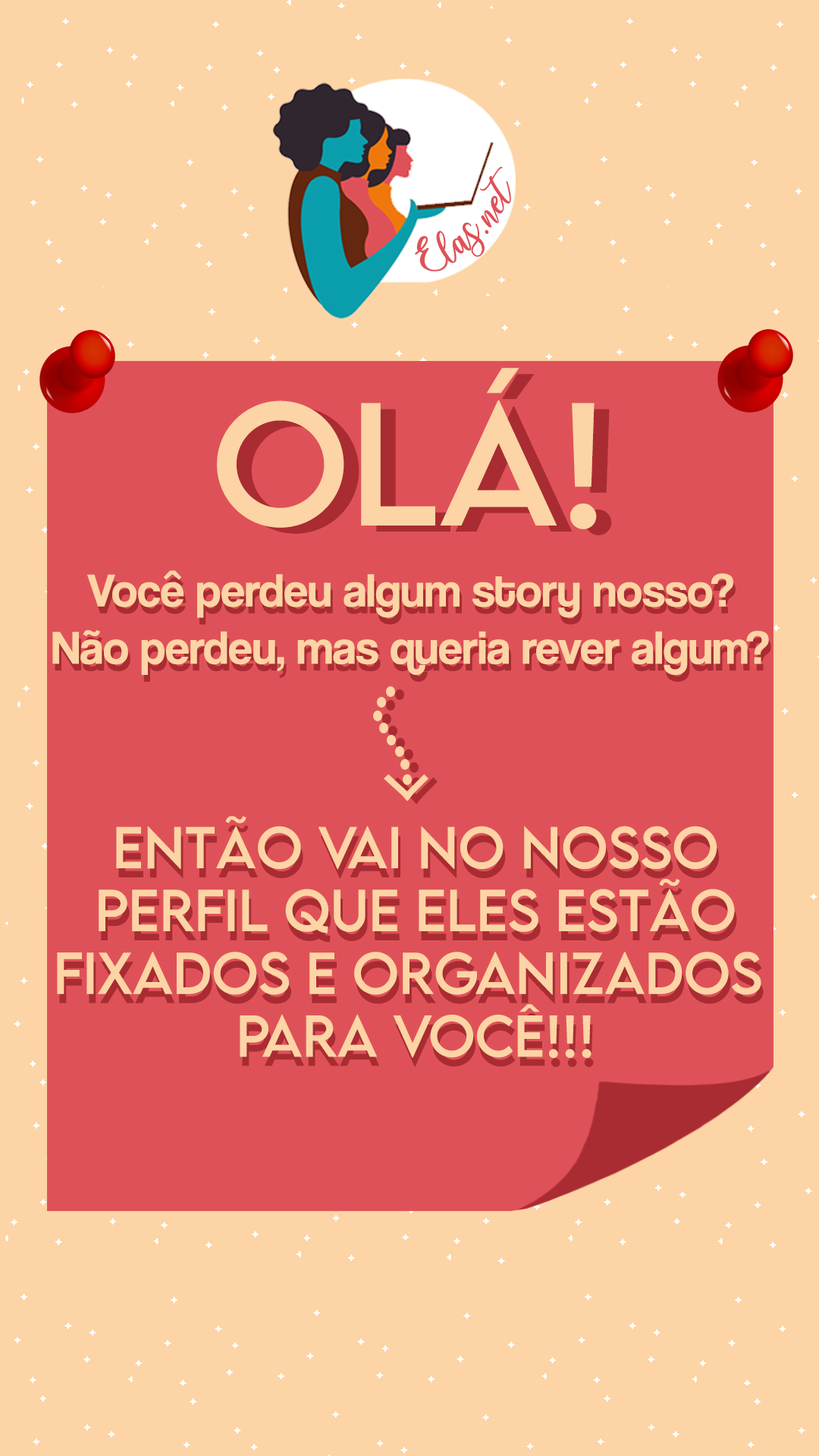
<style>
.page{position:relative;width:819px;height:1456px;background:#fcd4a5}
.page>*{position:absolute;margin:0}
.t1{font:28.8px "charlinda-Regular";color:#df5158;scale:1.17 1}
.t2{font:155.6px "LEMONMILK-Regular";color:#fcd4a5}
.t3{font:155.6px "LEMONMILK-Regular"}
.t4{font:47.8px "CoolveticaRg-Regular";color:#fcd4a5}
.t5{font:56.2px "CaviarDreams";color:#fcd4a5}
.t6{font:47.8px "CoolveticaRg-Regular"}
.t7{font:56.2px "CaviarDreams"}
.t8{font:52.3px "LEMONMILK-Regular";color:#fcd4a5}
.t9{font:52.3px "LEMONMILK-Regular";color:#a92c32}
</style>
<div class="page">
<p class="t1" style="left:415px;top:167px;width:96px;height:104px;rotate:-45deg">Elas.net</p>
<p class="t2" style="left:217px;top:368px;width:380px;height:161px">Olá!</p>
<p class="t3" style="left:232px;top:374px;width:380px;height:161px">Olá!</p>
<p class="t4" style="left:52px;top:570px;width:717px;height:105px;text-align:center"><span class="t5"><br></span>Você perdeu algum story nosso? <br>Não perdeu, mas queria rever algum?</p>
<p class="t6" style="left:55px;top:577px;width:716px;height:105px;text-align:center"><span class="t7"><br></span>Você perdeu algum story nosso? <br>Não perdeu, mas queria rever algum?</p>
<p class="t8" style="left:57px;top:816px;width:704px;height:242px;text-align:center">Então vai no nosso<br>perfil que eles estão<br>fixados e organizados <br>para você!!!</p>
<p class="t9" style="left:59px;top:825px;width:705px;height:242px;text-align:center">Então vai no nosso<br>perfil que eles estão<br>fixados e organizados <br>para você!!!</p>
</div>
